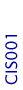
<style>
.page{position:relative;width:23px;height:90px;background:#ffffff}
.page>*{position:absolute;margin:0}
.t1{font:16px "LucidaSans";color:#0000a0}
</style>
<div class="page">
<p class="t1" style="left:5px;top:35px;width:13px;height:50px;rotate:-90deg">CIS001</p>
</div>
